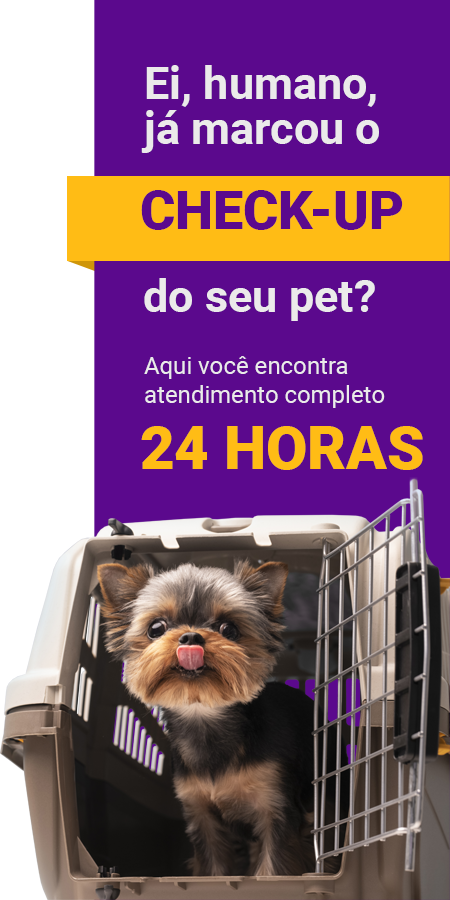
<style>
.page{position:relative;width:450px;height:900px;background:#5b098d}
.page>*{position:absolute;margin:0}
.t1{font:45px/45px "Roboto-Bold";color:#ebeaea}
.t2{font:53.8px "Roboto-Black";color:#5b098d}
.t3{font:45px "Roboto-Bold";color:#ebeaea}
.t4{font:24px "Roboto-Regular";color:#ebeaea}
.t5{font:59.8px "Roboto-Black";color:#ffbc15}
</style>
<div class="page">
<p class="t1" style="left:141px;top:65px;width:238px;height:88px">Ei, humano,<br>já marcou o</p>
<p class="t2" style="left:141px;top:190px;width:262px;height:40px">CHECK-UP</p>
<p class="t3" style="left:144px;top:278px;width:231px;height:43px">do seu pet?</p>
<p class="t4" style="left:144px;top:356px;width:241px;height:52px">Aqui você encontra<br>atendimento completo</p>
<p class="t5" style="left:141px;top:426px;width:282px;height:44px">24 HORAS</p>
</div>
